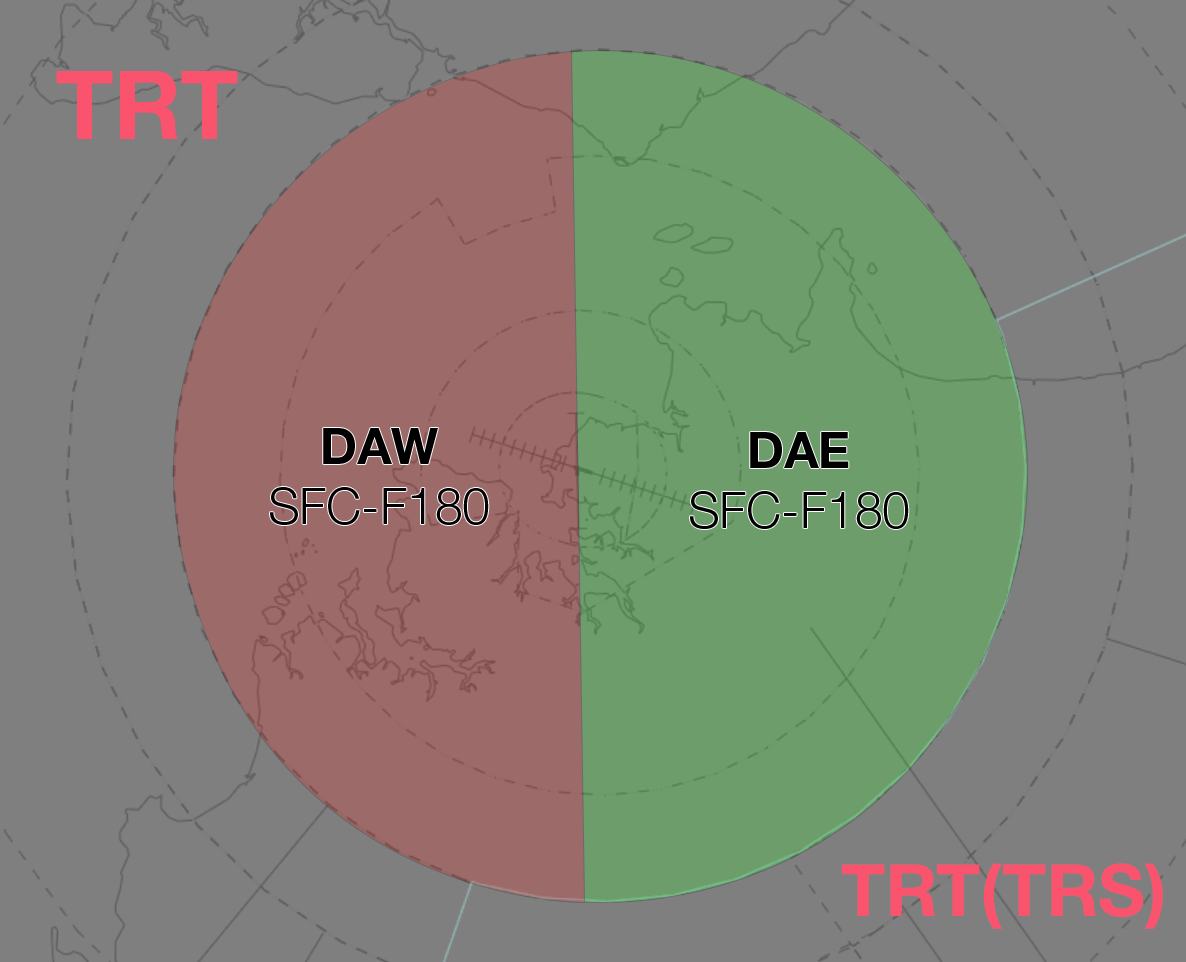
<style>
.page{position:relative;width:1186px;height:962px;background:#7f7f7f}
.page>*{position:absolute;margin:0}
.t1{font:95.5px "HelveticaNeueLTStd-Bd";color:#f9536e}
.t2{font:50.1px "HelveticaNeueLTStd-Lt";color:#000000}
.t3{font:50.1px "HelveticaNeueLTStd-Bd";color:#000000}
.t4{font:72.3px "HelveticaNeue-Bold";color:#f9536e}
</style>
<div class="page">
<p class="t1" style="left:56px;top:71px;width:182px;height:68px">TRT</p>
<p class="t2" style="left:270px;top:428px;width:219px;height:97px;text-align:center"><span class="t3">DAW<br></span>SFC-F180</p>
<p class="t2" style="left:690px;top:432px;width:219px;height:97px;text-align:center"><span class="t3">DAE<br></span>SFC-F180</p>
<p class="t4" style="left:842px;top:863px;width:321px;height:66px">TRT(TRS)</p>
</div>
